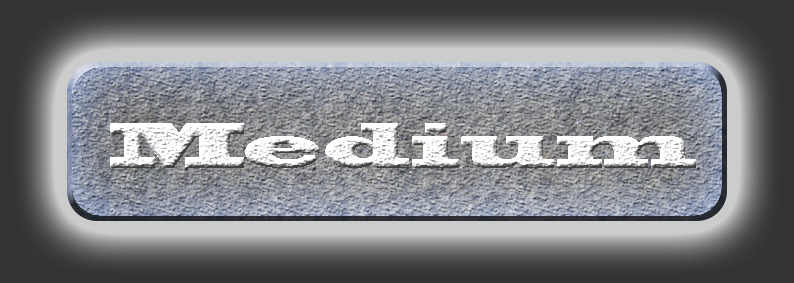
<style>
.page{position:relative;width:794px;height:283px}
.page>*{position:absolute;margin:0}
.t1{font:60px "BlackoakStd";color:#ffffff}
</style>
<div class="page">
<p class="t1" style="left:110px;top:123px;width:586px;height:45px">Medium</p>
</div>
